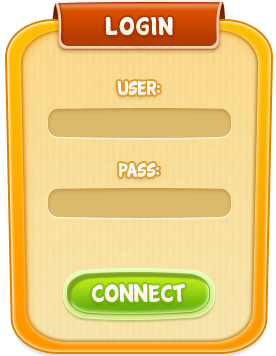
<style>
.page{position:relative;width:276px;height:356px}
.page>*{position:absolute;margin:0}
.t1{font:26px "Cartwheel";color:#ffffff}
.t2{font:20px "Cartwheel";color:#ffffff}
.t3{font:25px "Cartwheel";color:#ffffff}
</style>
<div class="page">
<p class="t1" style="left:105px;top:17px;width:68px;height:18px">LOGIN</p>
<p class="t2" style="left:117px;top:81px;width:43px;height:14px">USER:</p>
<p class="t2" style="left:119px;top:163px;width:40px;height:14px">PASS:</p>
<p class="t3" style="left:92px;top:284px;width:93px;height:18px">Connect</p>
</div>
